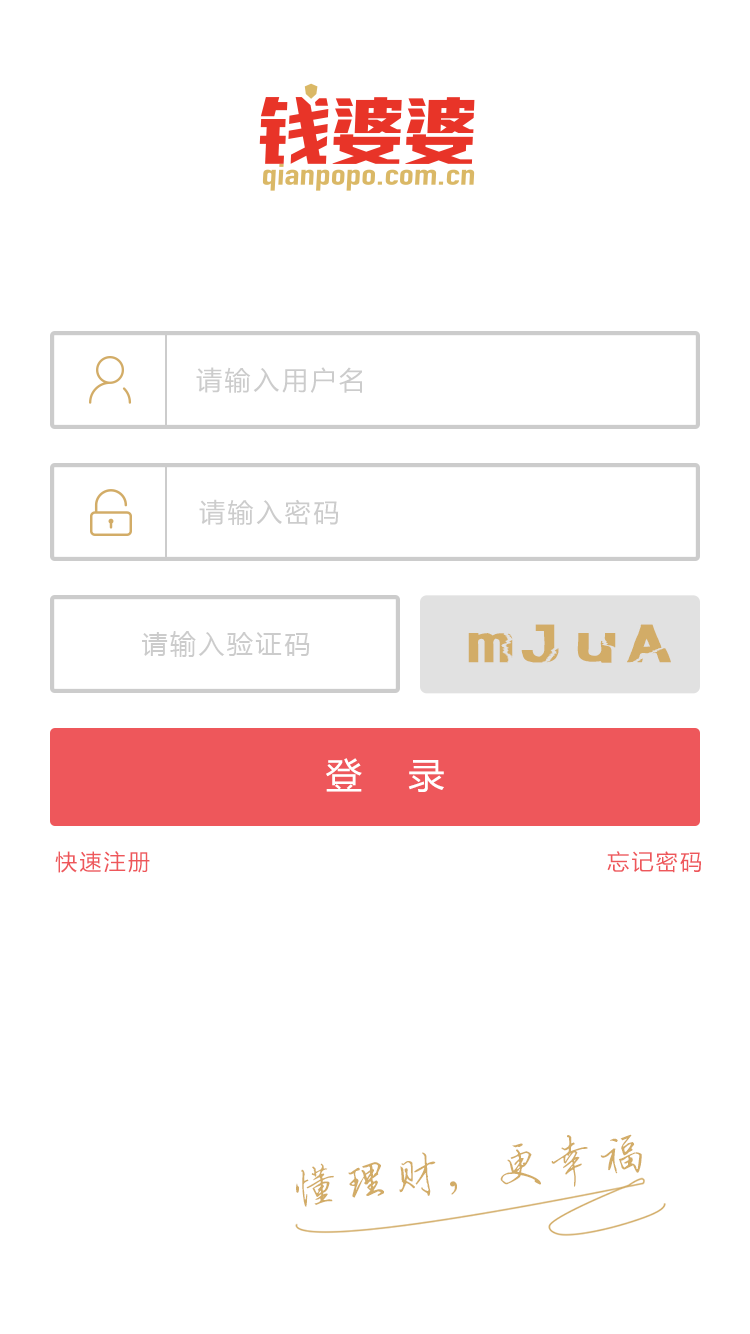
<style>
.page{position:relative;width:750px;height:1334px;background:#ffffff}
.page>*{position:absolute;margin:0}
.t1{font:26px "MicrosoftYaHei";letter-spacing:0.1em;color:#cccccc}
.t2{font:50px "PiliEG-Ultra-Big5";letter-spacing:0.1em;color:#d2ac67;scale:1.76 1}
.t3{font:36px "MicrosoftYaHei";letter-spacing:0.1em;color:#ffffff}
.t4{font:22px "MicrosoftYaHei";letter-spacing:0.1em;color:#ee575b}
.t5{font:50px "QXyingbixing";letter-spacing:0.025em;color:#d2ac67}
</style>
<div class="page">
<p class="t1" style="left:196px;top:367px;width:166px;height:26px">请输入用户名</p>
<p class="t1" style="left:199px;top:499px;width:140px;height:26px">请输入密码</p>
<p class="t2" style="left:468px;top:624px;width:203px;height:39px">mJuA</p>
<p class="t1" style="left:142px;top:631px;width:168px;height:26px">请输入验证码</p>
<p class="t3" style="left:326px;top:758px;width:118px;height:34px">登   录</p>
<p class="t4" style="left:55px;top:851px;width:95px;height:22px">快速注册</p>
<p class="t4" style="left:607px;top:851px;width:94px;height:22px">忘记密码</p>
<p class="t5" style="left:296px;top:1134px;width:346px;height:73px;rotate:-6deg">懂理财，更幸福</p>
</div>
